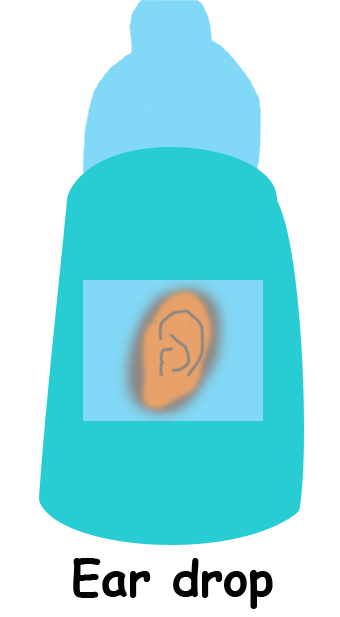
<style>
.page{position:relative;width:340px;height:617px;background:#ffffff}
.page>*{position:absolute;margin:0}
.t1{font:48px "ComicSansMS-Bold";color:#030303}
</style>
<div class="page">
<p class="t1" style="left:73px;top:558px;width:200px;height:51px">Ear drop</p>
</div>
